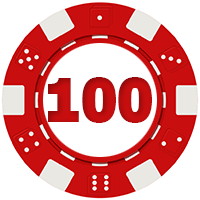
<style>
.page{position:relative;width:200px;height:200px;background:#ffffff}
.page>*{position:absolute;margin:0}
.t1{font:60px "VerdanaPro-CondBlack";color:#c80e0f}
</style>
<div class="page">
<p class="t1" style="left:48px;top:77px;width:104px;height:46px">100</p>
</div>
